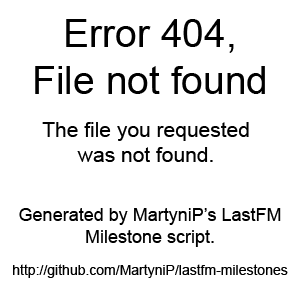
<style>
.page{position:relative;width:300px;height:295px;background:#ffffff}
.page>*{position:absolute;margin:0}
.t1{font:39px "ArialMT";color:#000000}
.t2{font:21px "ArialMT";color:#000000}
.t3{font:18px "ArialMT";color:#000000}
.t4{font:14px "ArialMT";color:#000000}
</style>
<div class="page">
<p class="t1" style="left:35px;top:19px;width:230px;height:75px;text-align:center">Error 404,<br>File not found</p>
<p class="t2" style="left:42px;top:122px;width:207px;height:40px;text-align:center">The file you requested <br>was not found.</p>
<p class="t3" style="left:19px;top:208px;width:262px;height:39px;text-align:center">Generated by MartyniP’s LastFM<br>Milestone script.</p>
<p class="t4" style="left:13px;top:264px;width:275px;height:14px">http://github.com/MartyniP/lastfm-milestones</p>
</div>
